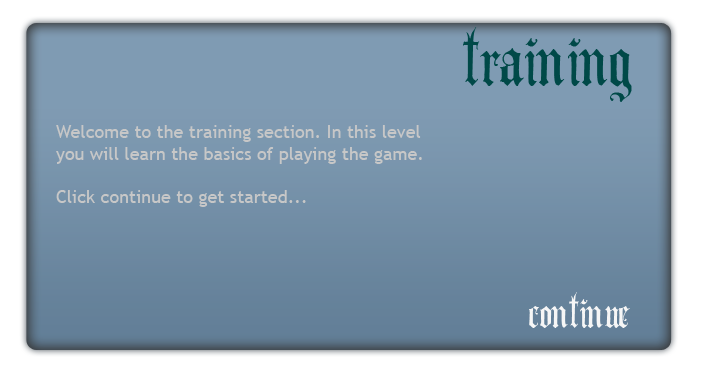
<style>
.page{position:relative;width:707px;height:377px}
.page>*{position:absolute;margin:0}
.t1{font:100px "AngloText";color:#004948}
.t2{font:18px "TrebuchetMS";color:#c7c7c7}
.t3{font:60px "AngloText";color:#f6f6f6}
</style>
<div class="page">
<p class="t1" style="left:463px;top:27px;width:169px;height:75px">training</p>
<p class="t2" style="left:56px;top:125px;width:366px;height:82px">Welcome to the training section. In this level<br>you will learn the basics of playing the game.<br><br>Click continue to get started...</p>
<p class="t3" style="left:529px;top:292px;width:101px;height:36px">continue</p>
</div>
